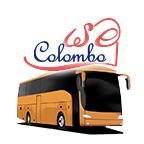
<style>
.page{position:relative;width:144px;height:144px;background:#ffffff}
.page>*{position:absolute;margin:0}
.t1{font:48.4px "FNNILANTHINormal";color:#e95555}
.t2{font:30.7px "FrenchScriptMT";letter-spacing:-0.032em;color:#07247e;font-weight:bold}
</style>
<div class="page">
<p class="t1" style="left:23px;top:18px;width:98px;height:53px">huq</p>
<p class="t2" style="left:34px;top:41px;width:73px;height:21px">Colombo</p>
</div>
